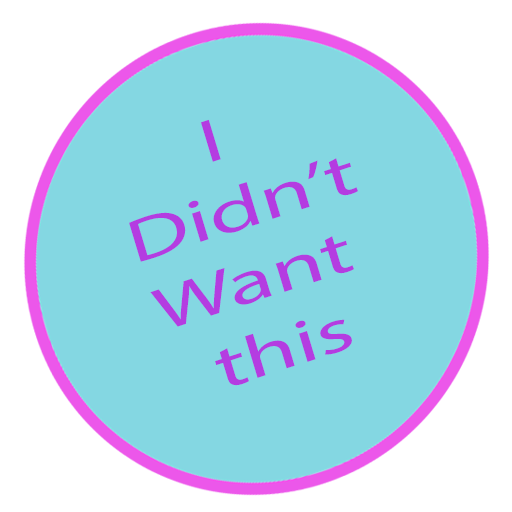
<style>
.page{position:relative;width:512px;height:512px;background:#84d7e2}
.page>*{position:absolute;margin:0}
.t1{font:61px "MyriadPro-Regular";color:#b43ce1;scale:1.55 1}
</style>
<div class="page">
<p class="t1" style="left:129px;top:119px;width:229px;height:267px;text-align:center;rotate:-18deg">I <br>Didn’t<br>Want <br>this</p>
</div>
